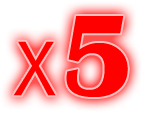
<style>
.page{position:relative;width:145px;height:113px;background:#ffffff}
.page>*{position:absolute;margin:0}
.t1{font:100px "HGGothicM";color:#fe0000}
.t2{font:120px "BritannicBold";color:#fe0000}
</style>
<div class="page">
<p class="t1" style="left:13px;top:16px;width:115px;height:81px">x<span class="t2">5</span></p>
</div>
